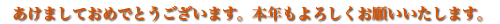
<style>
.page{position:relative;width:500px;height:24px;background:#ffffff}
.page>*{position:absolute;margin:0}
.t1{font:15px "HiraMinProN-W6";color:#d65100}
</style>
<div class="page">
<p class="t1" style="left:13px;top:5px;width:469px;height:16px">あけましておめでとうございます。本年もよろしくお願いいたします。</p>
</div>
